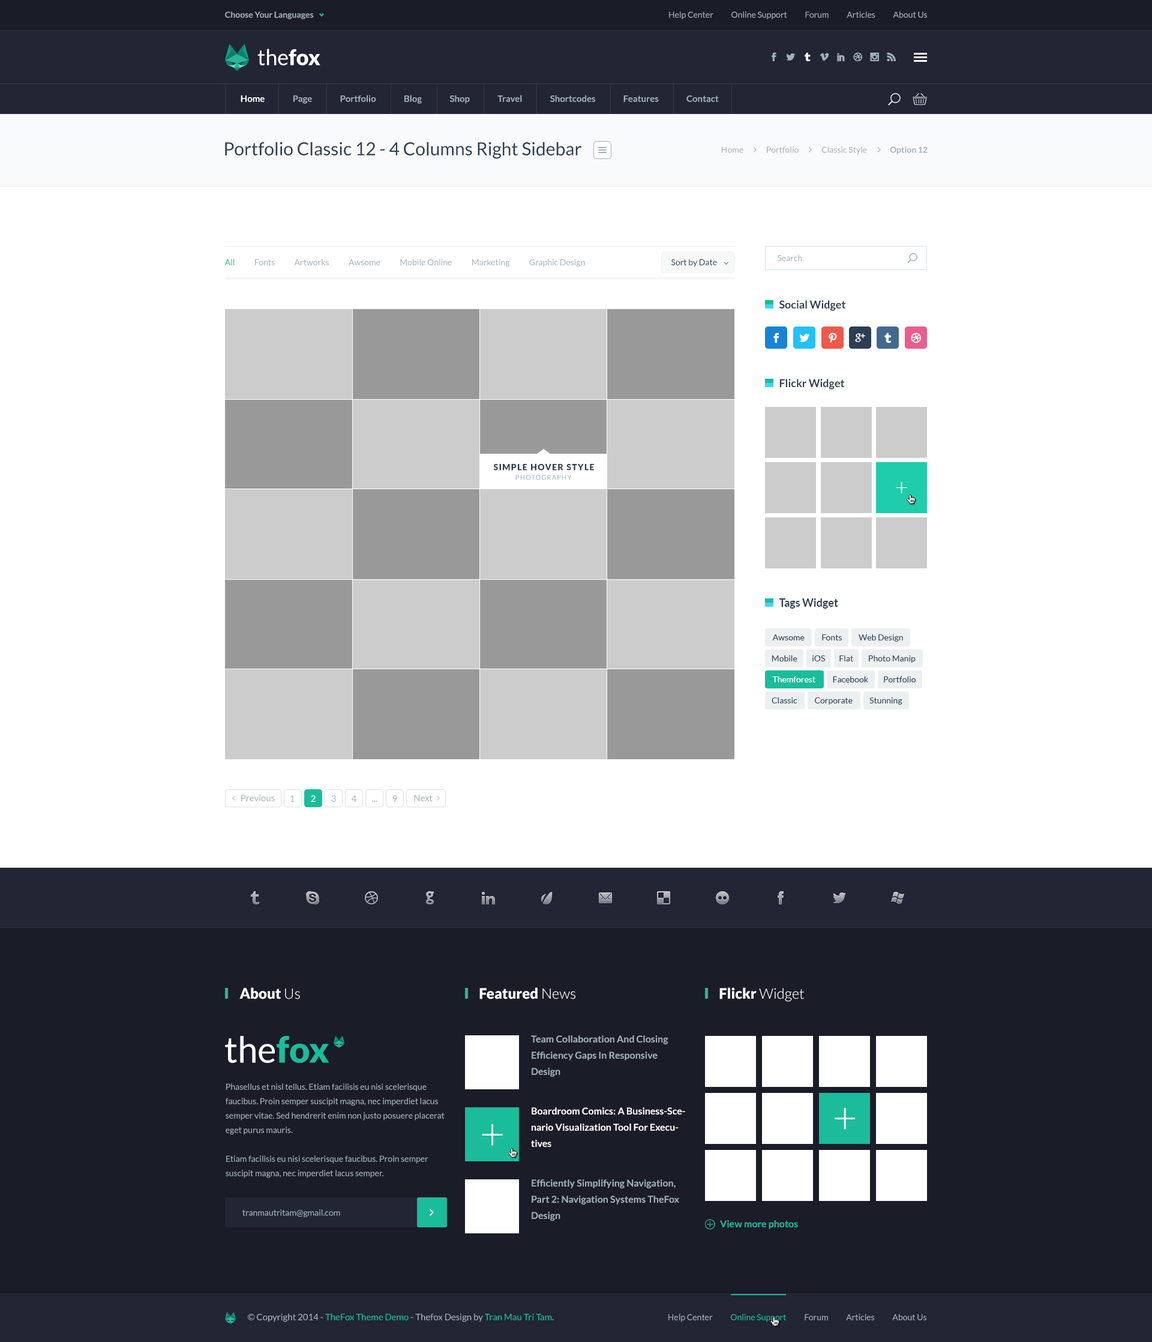
<style>
.page{position:relative;width:1152px;height:1342px;background:#ffffff}
.page>*{position:absolute;margin:0}
.t1{font:8.4px "Lato-Bold";color:#a1b1bc}
.t2{font:8.4px "Lato-Regular";color:#a1b1bc}
.t3{font:21.6px "Lato-Regular";color:#ffffff}
.t4{font:21.6px "Lato-Black";color:#ffffff}
.t5{font:9px "Lato-Bold";color:#a1b1bc}
.t6{font:9px "Lato-Bold";color:#ffffff}
.t7{font:18px "Lato-Regular";color:#2c3e50}
.t8{font:8.4px "Lato-Regular";color:#1abc9c}
.t9{font:8.4px "Lato-Regular";color:#2c3e50}
.t10{font:10.8px "Lato-Bold";color:#2c3e50}
.t11{font:8.4px "Lato-Black";letter-spacing:0.1em;color:#2c3e50}
.t12{font:6.6px "Lato-Regular";letter-spacing:0.1em;color:#a1b1bc}
.t13{font:24px "Lato-Light";color:#ffffff}
.t14{font:8.4px "Lato-Regular";color:#34495e}
.t15{font:8.4px "Lato-Regular";color:#ffffff}
.t16{font:9px "Lato-Regular";color:#a1b1bc}
.t17{font:9px "Lato-Regular";color:#ffffff}
.t18{font:14.4px "Lato-Black";color:#ffffff}
.t19{font:14.4px "Lato-Light";color:#ffffff}
.t20{font:36px "Lato-Regular";color:#ffffff}
.t21{font:36px "Lato-Black";color:#1abc9c}
.t22{font:9.6px/16.2px "Lato-Bold";color:#a1b1bc}
.t23{font:8.4px/14.4px "Lato-Regular";color:#a1b1bc}
.t24{font:9.6px/16.2px "Lato-Bold";color:#ffffff}
.t25{font:43.2px "Lato-Light";color:#ffffff}
.t26{font:9.6px "Lato-Bold";color:#1abc9c}
.t27{font:9px "Lato-Regular";color:#1abc9c}
</style>
<div class="page">
<p class="t1" style="left:225px;top:11px;width:89px;height:8px">Choose Your Languages</p>
<p class="t2" style="left:669px;top:11px;width:258px;height:8px">Help Center           Online Support           Forum           Articles           About Us</p>
<p class="t3" style="left:257px;top:49px;width:63px;height:16px">the<span class="t4">fox</span></p>
<p class="t5" style="left:241px;top:95px;width:478px;height:9px"><span class="t6">Home</span>                Page                Portfolio                Blog                Shop                Travel                Shortcodes                Features                Contact</p>
<p class="t7" style="left:225px;top:142px;width:356px;height:17px">Portfolio Classic 12 - 4 Columns Right Sidebar</p>
<p class="t2" style="left:722px;top:146px;width:206px;height:8px">Home              Portfolio              Classic Style              <span class="t1">Option 12</span></p>
<p class="t2" style="left:778px;top:254px;width:24px;height:7px">Search</p>
<p class="t2" style="left:224px;top:259px;width:361px;height:8px"><span class="t8">All</span>            Fonts            Artworks            Awsome            Mobile Online            Marketing            Graphic Design</p>
<p class="t9" style="left:671px;top:259px;width:46px;height:8px">Sort by Date</p>
<p class="t10" style="left:779px;top:300px;width:66px;height:11px">Social Widget</p>
<p class="t10" style="left:779px;top:379px;width:65px;height:10px">Flickr Widget</p>
<p class="t11" style="left:493px;top:464px;width:101px;height:6px">SIMPLE HOVER STYLE</p>
<p class="t12" style="left:515px;top:475px;width:57px;height:5px">PHOTOGRAPHY</p>
<p class="t13" style="left:896px;top:482px;width:12px;height:11px">+</p>
<p class="t10" style="left:779px;top:598px;width:59px;height:10px">Tags Widget</p>
<p class="t14" style="left:772px;top:634px;width:33px;height:6px">Awsome</p>
<p class="t14" style="left:822px;top:634px;width:20px;height:6px">Fonts</p>
<p class="t14" style="left:859px;top:634px;width:44px;height:7px">Web Design</p>
<p class="t14" style="left:772px;top:655px;width:25px;height:6px">Mobile</p>
<p class="t14" style="left:812px;top:655px;width:13px;height:6px">iOS</p>
<p class="t14" style="left:839px;top:655px;width:14px;height:6px">Flat</p>
<p class="t14" style="left:869px;top:655px;width:47px;height:7px">Photo Manip</p>
<p class="t15" style="left:772px;top:676px;width:43px;height:6px">Themforest</p>
<p class="t14" style="left:833px;top:676px;width:35px;height:6px">Facebook</p>
<p class="t14" style="left:884px;top:676px;width:32px;height:6px">Portfolio</p>
<p class="t14" style="left:772px;top:697px;width:25px;height:6px">Classic</p>
<p class="t14" style="left:815px;top:697px;width:38px;height:7px">Corporate</p>
<p class="t14" style="left:869px;top:697px;width:33px;height:7px">Stunning</p>
<p class="t16" style="left:241px;top:794px;width:34px;height:7px">Previous</p>
<p class="t16" style="left:290px;top:795px;width:5px;height:7px">1</p>
<p class="t17" style="left:311px;top:795px;width:5px;height:7px">2</p>
<p class="t16" style="left:331px;top:795px;width:5px;height:7px">3</p>
<p class="t16" style="left:352px;top:795px;width:5px;height:7px">4</p>
<p class="t16" style="left:392px;top:795px;width:5px;height:7px">9</p>
<p class="t16" style="left:414px;top:794px;width:19px;height:7px">Next</p>
<p class="t16" style="left:372px;top:800px;width:5px;height:2px">...</p>
<p class="t18" style="left:239px;top:987px;width:61px;height:12px">About <span class="t19">Us</span></p>
<p class="t18" style="left:479px;top:987px;width:96px;height:12px">Featured <span class="t19">News</span></p>
<p class="t18" style="left:719px;top:987px;width:85px;height:14px">Flickr <span class="t19">Widget</span></p>
<p class="t20" style="left:225px;top:1035px;width:104px;height:28px">the<span class="t21">fox</span></p>
<p class="t22" style="left:531px;top:1035px;width:137px;height:41px">Team Collaboration And Closing Efficiency Gaps In Responsive Design</p>
<p class="t23" style="left:226px;top:1083px;width:219px;height:95px">Phasellus et nisl tellus. Etiam facilisis eu nisi scelerisque faucibus. Proin semper suscipit magna, nec imperdiet lacus semper vitae. Sed hendrerit enim non justo posuere placerat eget purus mauris.<br><br>Etiam facilisis eu nisi scelerisque faucibus. Proin semper suscipit magna, nec imperdiet lacus semper.</p>
<p class="t24" style="left:531px;top:1107px;width:154px;height:40px">Boardroom Comics: A Business-Scenario Visualization Tool For Executives</p>
<p class="t25" style="left:835px;top:1108px;width:20px;height:21px">+</p>
<p class="t25" style="left:482px;top:1124px;width:21px;height:21px">+</p>
<p class="t22" style="left:532px;top:1179px;width:147px;height:41px">Efficiently Simplifying Navigation, Part 2: Navigation Systems TheFox Design</p>
<p class="t2" style="left:242px;top:1209px;width:98px;height:8px">tranmautritam@gmail.com</p>
<p class="t26" style="left:720px;top:1220px;width:78px;height:9px">View more photos</p>
<p class="t16" style="left:248px;top:1313px;width:306px;height:9px">© Copyright 2014 - <span class="t27">TheFox Theme Demo</span> - Thefox Design by <span class="t27">Tran Mau Tri Tam</span>.</p>
<p class="t2" style="left:668px;top:1313px;width:258px;height:9px">Help Center           <span class="t8">Online Support</span>           Forum           Articles           About Us</p>
</div>
